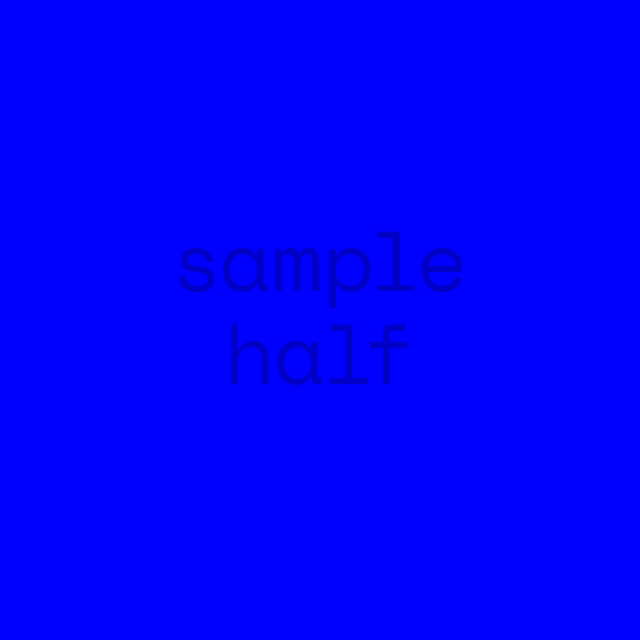
<style>
.page{position:relative;width:640px;height:640px;background:#0000ff}
.page>*{position:absolute;margin:0}
.t1{font:84.5px/93.3px "SpaceMono-Regular";letter-spacing:-0.01em;color:#0000c6}
</style>
<div class="page">
<p class="t1" style="left:178px;top:231px;width:284px;height:155px;text-align:center">sample<br>half</p>
</div>
